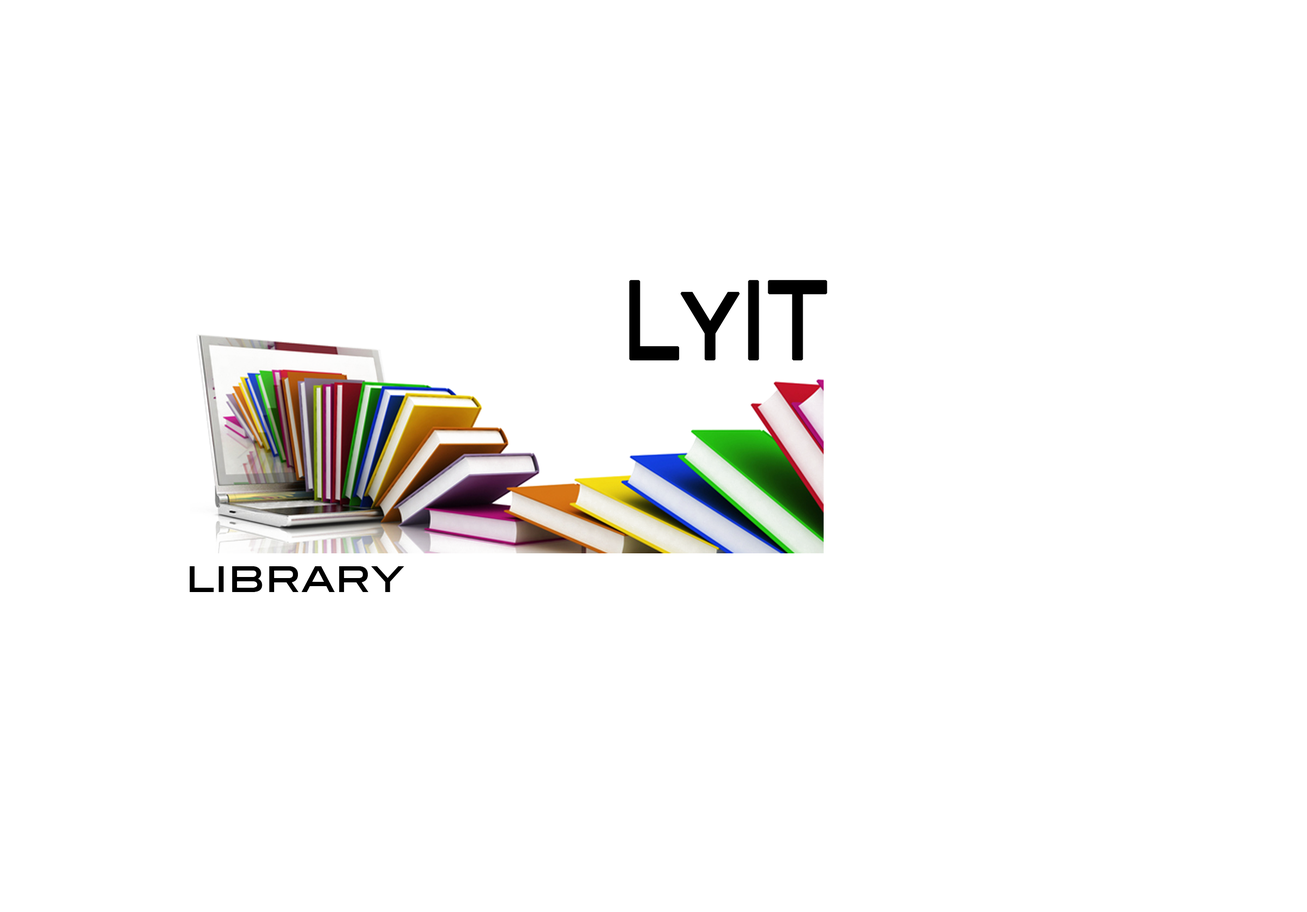
<style>
.page{position:relative;width:1307px;height:912px;background:#ffffff}
.page>*{position:absolute;margin:0}
.t1{font:107.6px "BlairMdITCTTMedium";color:#000000;font-weight:bold;scale:0.65 1}
.t2{font:40.3px "BlairMdITCTTMedium";color:#000000}
</style>
<div class="page">
<p class="t1" style="left:629px;top:280px;width:199px;height:81px">LyIT</p>
<p class="t2" style="left:189px;top:566px;width:215px;height:26px">library</p>
</div>
